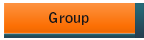
<style>
.page{position:relative;width:144px;height:40px}
.page>*{position:absolute;margin:0}
.t1{font:13.9px "BellGothicStd-Bold";color:#181818;scale:1.15 1}
</style>
<div class="page">
<p class="t1" style="left:49px;top:12px;width:40px;height:13px">Group</p>
</div>
